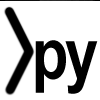
<style>
.page{position:relative;width:100px;height:100px;background:#ffffff}
.page>*{position:absolute;margin:0}
.t1{font:72px "Arial-BoldMT";letter-spacing:-0.05em;color:#000000;scale:0.83 1}
</style>
<div class="page">
<p class="t1" style="left:35px;top:39px;width:63px;height:54px">py</p>
</div>
